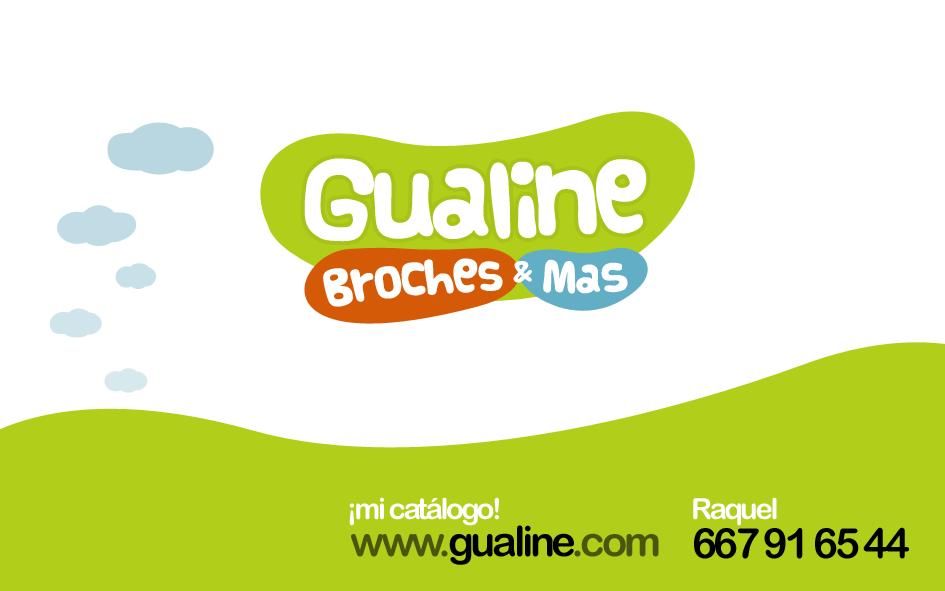
<style>
.page{position:relative;width:945px;height:591px;background:#ffffff}
.page>*{position:absolute;margin:0}
.t1{font:82.2px "Vanilla";letter-spacing:-0.08em;color:#ffffff}
.t2{font:38.1px "Vanilla";letter-spacing:-0.04em;color:#ffffff}
.t3{font:33.3px "Vanilla";letter-spacing:-0.04em;color:#ffffff}
.t4{font:25.5px "Vanilla";letter-spacing:-0.04em;color:#ffffff}
.t5{font:33px "Vanilla";letter-spacing:-0.04em;color:#ffffff}
.t6{font:29.2px "ArialRoundedMTBold";letter-spacing:-0.08em;color:#ffffff}
.t7{font:41.7px "ArialRoundedMTBold";letter-spacing:-0.08em;color:#000000}
.t8{font:41.7px "ArialRoundedMTBold";letter-spacing:-0.08em;color:#4a560b}
</style>
<div class="page">
<p class="t1" style="left:304px;top:158px;width:343px;height:84px;rotate:-1deg">Gualine</p>
<p class="t2" style="left:323px;top:258px;width:180px;height:49px;rotate:-5deg">Broche<span class="t3">s</span></p>
<p class="t4" style="left:513px;top:261px;width:19px;height:22px;rotate:-3deg"><span class="t5"> </span>&amp;</p>
<p class="t5" style="left:543px;top:259px;width:85px;height:35px;rotate:-1deg">Mas</p>
<p class="t6" style="left:349px;top:497px;width:150px;height:29px">¡mi catálogo!</p>
<p class="t6" style="left:693px;top:497px;width:84px;height:29px">Raquel</p>
<p class="t7" style="left:351px;top:525px;width:308px;height:40px"><span class="t8">www.</span>gualine<span class="t8">.com</span></p>
<p class="t7" style="left:694px;top:527px;width:215px;height:32px">667 91 65 44</p>
</div>
